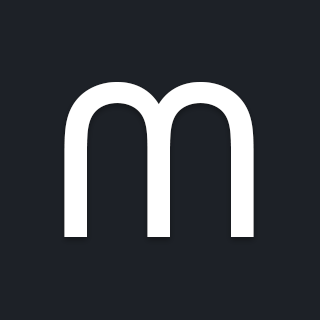
<style>
.page{position:relative;width:320px;height:320px;background:#1d2127}
.page>*{position:absolute;margin:0}
.t1{font:320px "Gidolinya-Regular";color:#ffffff}
</style>
<div class="page">
<p class="t1" style="left:64px;top:82px;width:190px;height:155px">m</p>
</div>
